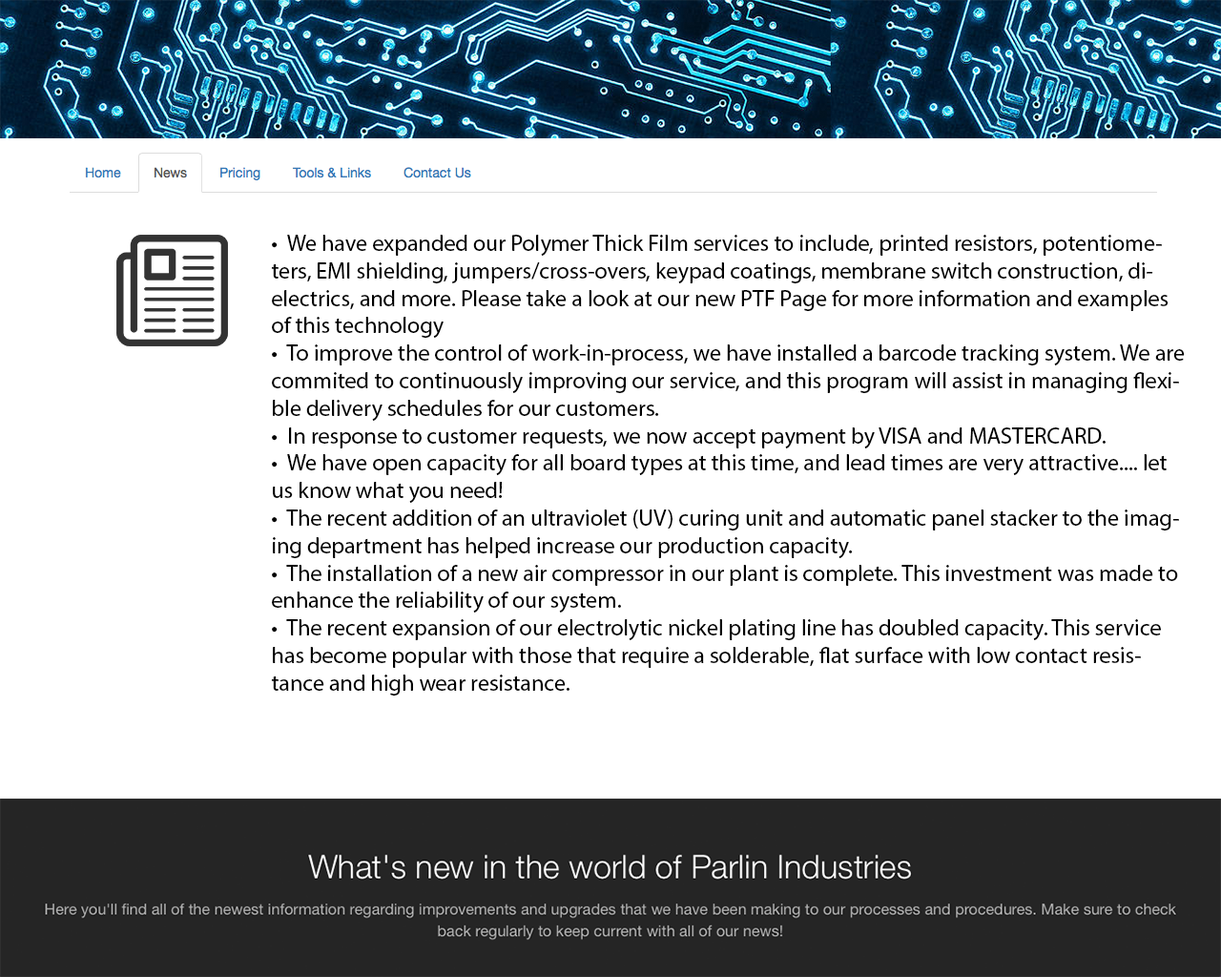
<style>
.page{position:relative;width:1221px;height:977px;background:#ffffff}
.page>*{position:absolute;margin:0}
.t1{font:22.9px "MyriadPro-Regular";color:#000000}
.t2{font:25.8px "MyriadPro-Regular";color:#000000}
</style>
<div class="page">
<p class="t1" style="left:271px;top:235px;width:914px;height:460px">•  We have expanded our Polymer Thick Film services to include, printed resistors, potentiometers, EMI shielding, jumpers/cross-overs, keypad coatings, membrane switch construction, dielectrics, and more. Please take a look at our new PTF Page for more information and examples of this technology<br>•  To improve the control of work-in-process, we have installed a barcode tracking system. We are commited to continuously improving our service, and this program will assist in managing flexible delivery schedules for our customers.<br>•  In response to customer requests, we now accept payment by VISA and MASTERCARD.<br>•  We have open capacity for all board types at this time, and lead times are very attractive.... let us know what you need!<br>•  The recent addition of an ultraviolet (UV) curing unit and automatic panel stacker to the imaging department has helped increase our production capacity.<br>•  The installation of a new air compressor in our plant is complete. This investment was made to enhance the reliability of our system.<br>•  The recent expansion of our electrolytic nickel plating line has doubled capacity. This service has become popular with those that require a solderable, flat surface with low contact resistance and high wear resistance.<br><br><br><br><span class="t2"><br> • In response to increasing high-volume automotive orders, we have added a new 95-ton punch press to our facility, bringing the current total to four units.</span></p>
</div>
